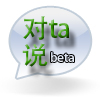
<style>
.page{position:relative;width:100px;height:100px;background:#ffffff}
.page>*{position:absolute;margin:0}
.t1{font:26px "AdobeHeitiStd-Regular"}
.t2{font:38px "AdobeHeitiStd-Regular"}
.t3{font:38px "SimSun"}
.t4{font:12px "AdobeHeitiStd-Regular";color:#e1e7f3}
</style>
<div class="page">
<p class="t1" style="left:23px;top:16px;width:47px;height:24px">对ta<br><span class="t2"><br>s<br></span><span class="t3"><br>说</span></p>
<p class="t1" style="left:22px;top:43px;width:26px;height:24px">说</p>
<p class="t4" style="left:51px;top:52px;width:23px;height:10px">beta</p>
</div>
